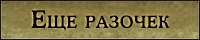
<style>
.page{position:relative;width:200px;height:40px}
.page>*{position:absolute;margin:0}
.t1{font:24px "OsvaldC-Bold";letter-spacing:0.03em;color:#000000;font-variant:small-caps}
</style>
<div class="page">
<p class="t1" style="left:31px;top:10px;width:139px;height:21px">Еще разочек</p>
</div>
